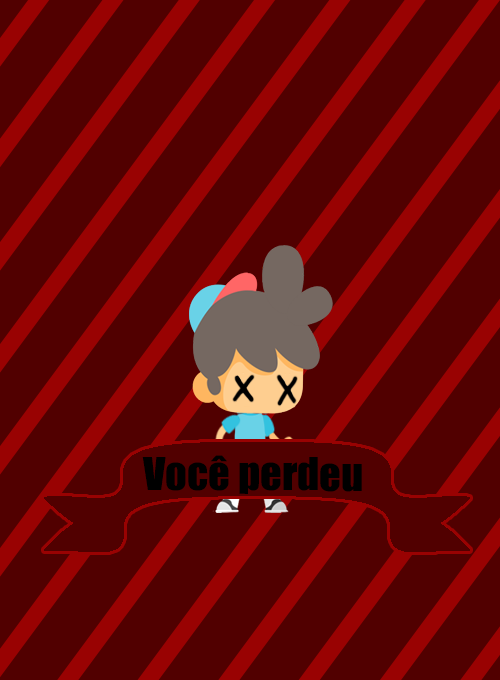
<style>
.page{position:relative;width:500px;height:680px;background:#510000}
.page>*{position:absolute;margin:0}
.t1{font:41.7px "Impact";color:#000000}
</style>
<div class="page">
<p class="t1" style="left:142px;top:455px;width:220px;height:39px">Você perdeu</p>
</div>
